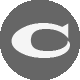
<style>
.page{position:relative;width:80px;height:80px;background:#666666}
.page>*{position:absolute;margin:0}
.t1{font:48px "LatinWide";color:#fefefe}
</style>
<div class="page">
<p class="t1" style="left:11px;top:23px;width:59px;height:35px;opacity:0.94">C</p>
</div>
